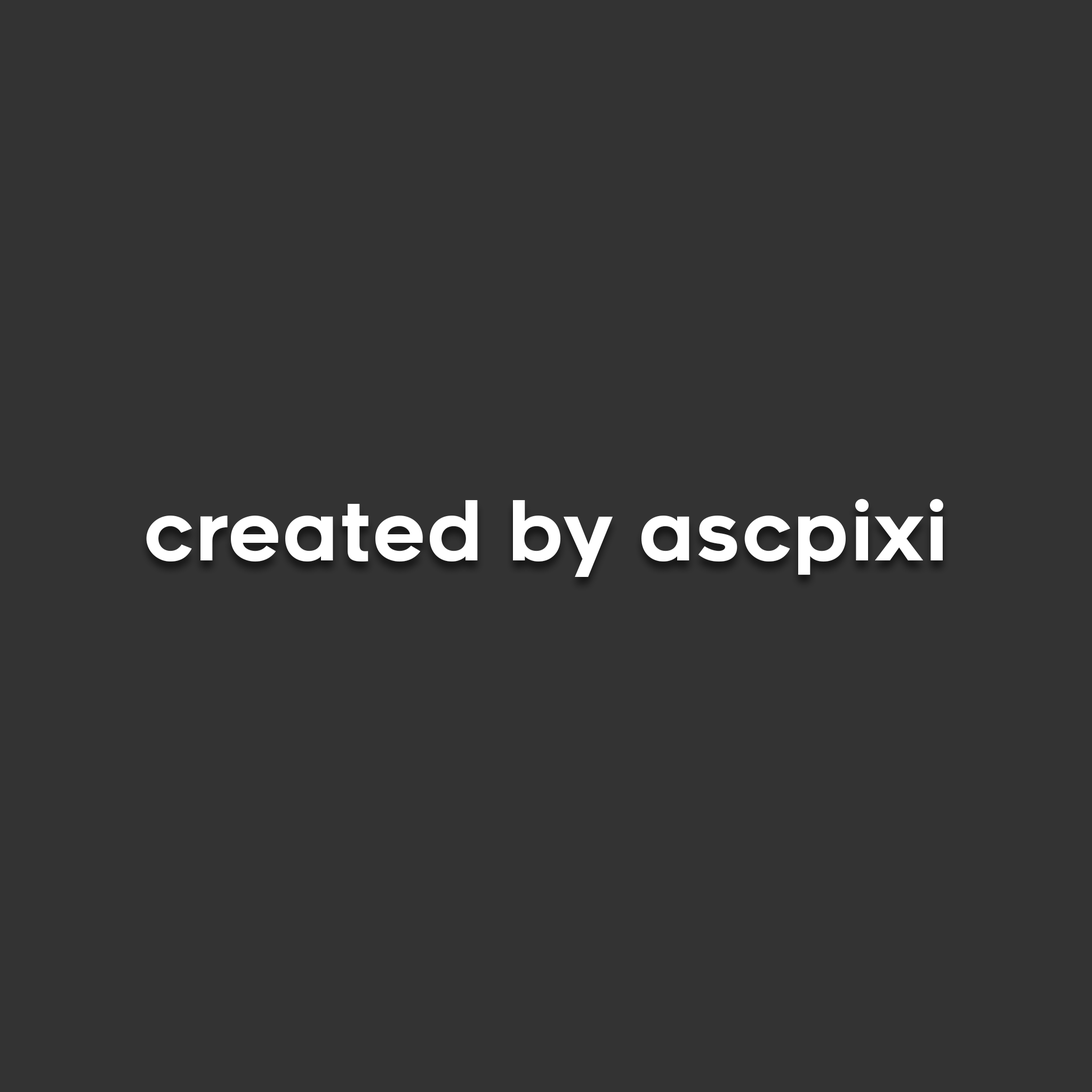
<style>
.page{position:relative;width:1092px;height:1092px;background:#333333}
.page>*{position:absolute;margin:0}
.t1{font:80px "Renogare-Regular";color:#ffffff}
</style>
<div class="page">
<p class="t1" style="left:146px;top:499px;width:797px;height:78px">created by ascpixi</p>
</div>
